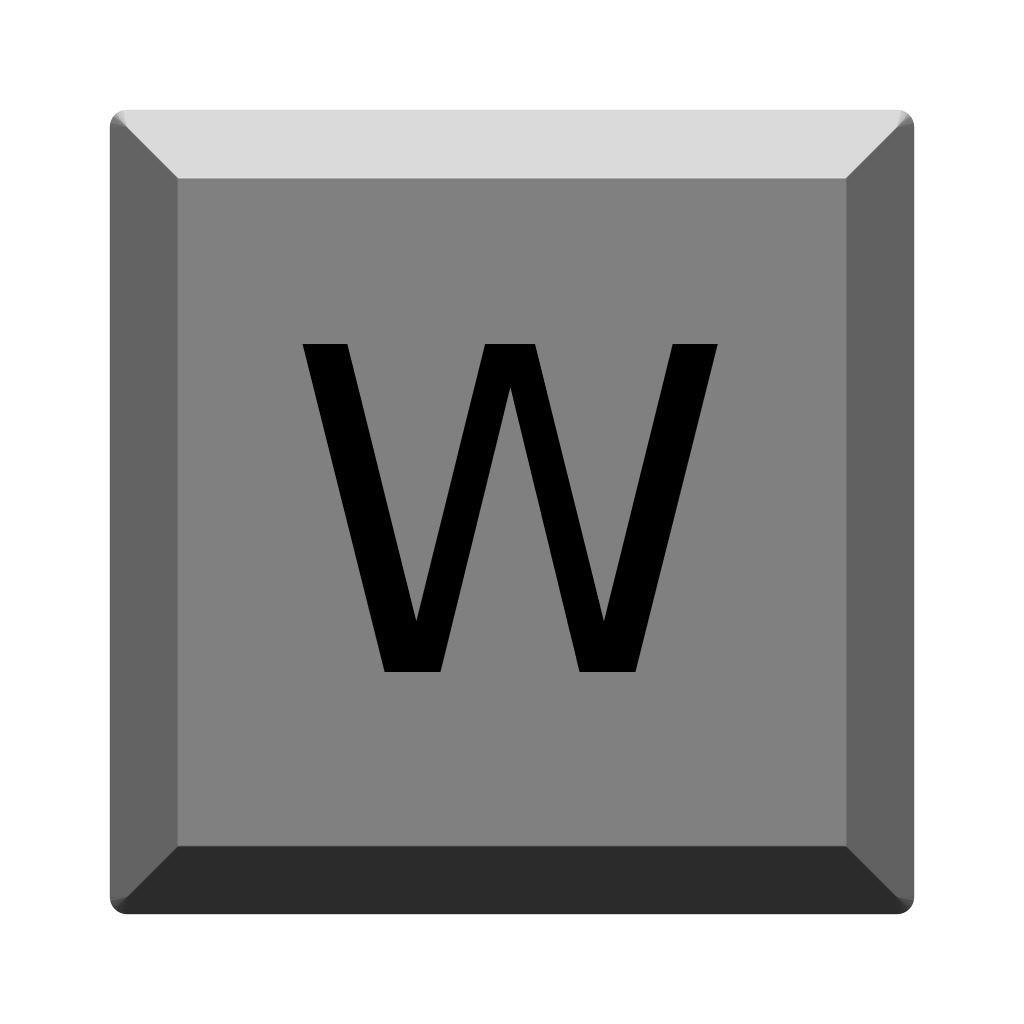
<style>
.page{position:relative;width:1024px;height:1024px;background:#ffffff}
.page>*{position:absolute;margin:0}
.t1{font:450px "DejaVuSans";color:#000000}
</style>
<div class="page">
<p class="t1" style="left:302px;top:343px;width:416px;height:329px">W</p>
</div>
